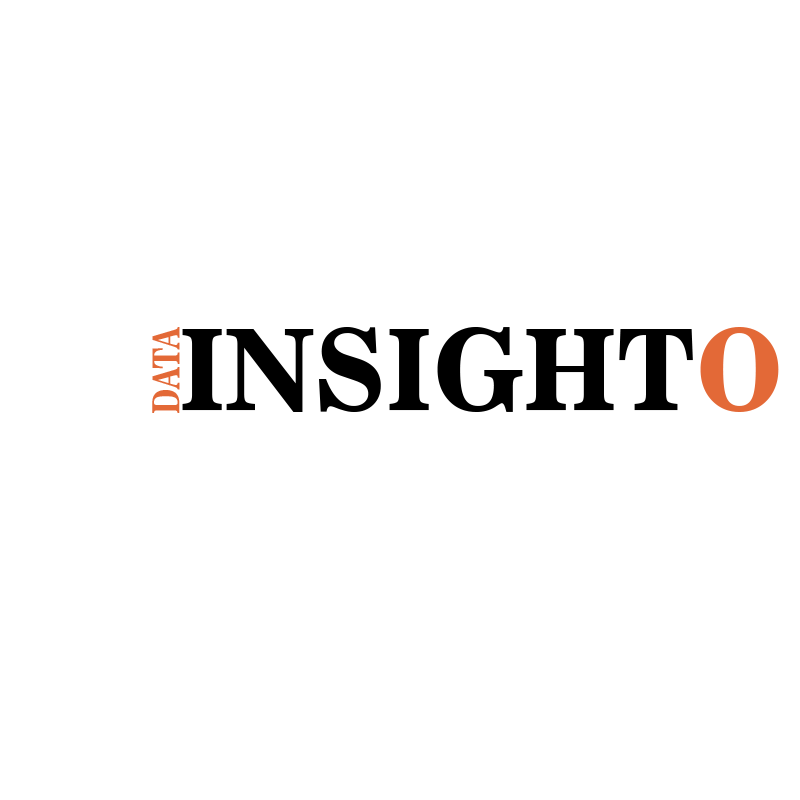
<style>
.page{position:relative;width:800px;height:800px;background:#ffffff}
.page>*{position:absolute;margin:0}
.t1{font:37px "News706BT-BoldC";color:#e36937;text-transform:uppercase;scale:0.82 1}
.t2{font:111.1px "News706BT-BoldC";color:#000000;text-transform:uppercase}
.t3{font:111.1px "News706BT-BoldC";color:#e36937;text-transform:uppercase}
</style>
<div class="page">
<p class="t1" style="left:152px;top:327px;width:28px;height:86px;rotate:-90deg">DATA</p>
<p class="t2" style="left:182px;top:327px;width:597px;height:85px">INSIGHT<span class="t3">O</span></p>
</div>
